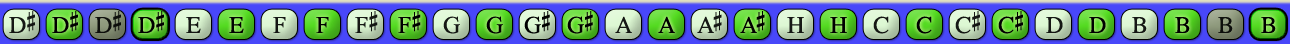
<style>
.page{position:relative;width:1290px;height:44px}
.page>*{position:absolute;margin:0}
.t1{font:24px "OpusChords";letter-spacing:-0.025em;color:#000000}
.t2{font:24px "OpusChords";color:#000000}
.t3{font:24px "OpusChords";letter-spacing:-0.1em;color:#000000}
</style>
<div class="page">
<p class="t1" style="left:9px;top:11px;width:26px;height:22px;opacity:0.9">D#</p>
<p class="t1" style="left:52px;top:11px;width:26px;height:22px">D#</p>
<p class="t1" style="left:95px;top:11px;width:26px;height:22px;opacity:0.9">D#</p>
<p class="t1" style="left:138px;top:11px;width:26px;height:22px">D#</p>
<p class="t2" style="left:186px;top:17px;width:15px;height:16px;opacity:0.9">E</p>
<p class="t2" style="left:229px;top:17px;width:15px;height:16px">E</p>
<p class="t2" style="left:273px;top:17px;width:13px;height:16px;opacity:0.9">F</p>
<p class="t2" style="left:316px;top:17px;width:13px;height:16px">F</p>
<p class="t2" style="left:355px;top:11px;width:23px;height:22px;opacity:0.9">F#</p>
<p class="t2" style="left:398px;top:11px;width:23px;height:22px">F#</p>
<p class="t2" style="left:443px;top:16px;width:17px;height:18px;opacity:0.9">G</p>
<p class="t2" style="left:486px;top:16px;width:17px;height:18px">G</p>
<p class="t1" style="left:524px;top:11px;width:26px;height:23px">G#</p>
<p class="t1" style="left:567px;top:11px;width:26px;height:23px">G#</p>
<p class="t2" style="left:615px;top:16px;width:17px;height:17px;opacity:0.9">A</p>
<p class="t2" style="left:658px;top:16px;width:17px;height:17px">A</p>
<p class="t3" style="left:697px;top:11px;width:25px;height:22px;opacity:0.9">A#</p>
<p class="t3" style="left:740px;top:11px;width:25px;height:22px">A#</p>
<p class="t2" style="left:787px;top:17px;width:17px;height:16px;opacity:0.9">H</p>
<p class="t2" style="left:830px;top:17px;width:17px;height:16px">H</p>
<p class="t2" style="left:873px;top:16px;width:16px;height:18px;opacity:0.9">C</p>
<p class="t2" style="left:916px;top:16px;width:16px;height:18px">C</p>
<p class="t2" style="left:955px;top:11px;width:25px;height:23px;opacity:0.9">C#</p>
<p class="t2" style="left:998px;top:11px;width:25px;height:23px">C#</p>
<p class="t2" style="left:1046px;top:17px;width:17px;height:16px;opacity:0.9">D</p>
<p class="t2" style="left:1089px;top:17px;width:17px;height:16px">D</p>
<p class="t2" style="left:1132px;top:17px;width:15px;height:16px;opacity:0.9">B</p>
<p class="t2" style="left:1175px;top:17px;width:15px;height:16px">B</p>
<p class="t2" style="left:1218px;top:17px;width:15px;height:16px;opacity:0.9">B</p>
<p class="t2" style="left:1261px;top:17px;width:15px;height:16px">B</p>
</div>
